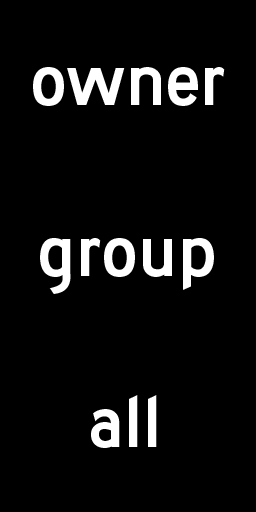
<style>
.page{position:relative;width:256px;height:512px;background:#000000}
.page>*{position:absolute;margin:0}
.t1{font:75.8px "Roadgeek2005SeriesD";color:#ffffff}
</style>
<div class="page">
<p class="t1" style="left:33px;top:67px;width:192px;height:39px">owner</p>
<p class="t1" style="left:40px;top:238px;width:174px;height:56px">group</p>
<p class="t1" style="left:91px;top:395px;width:66px;height:53px">all</p>
</div>
